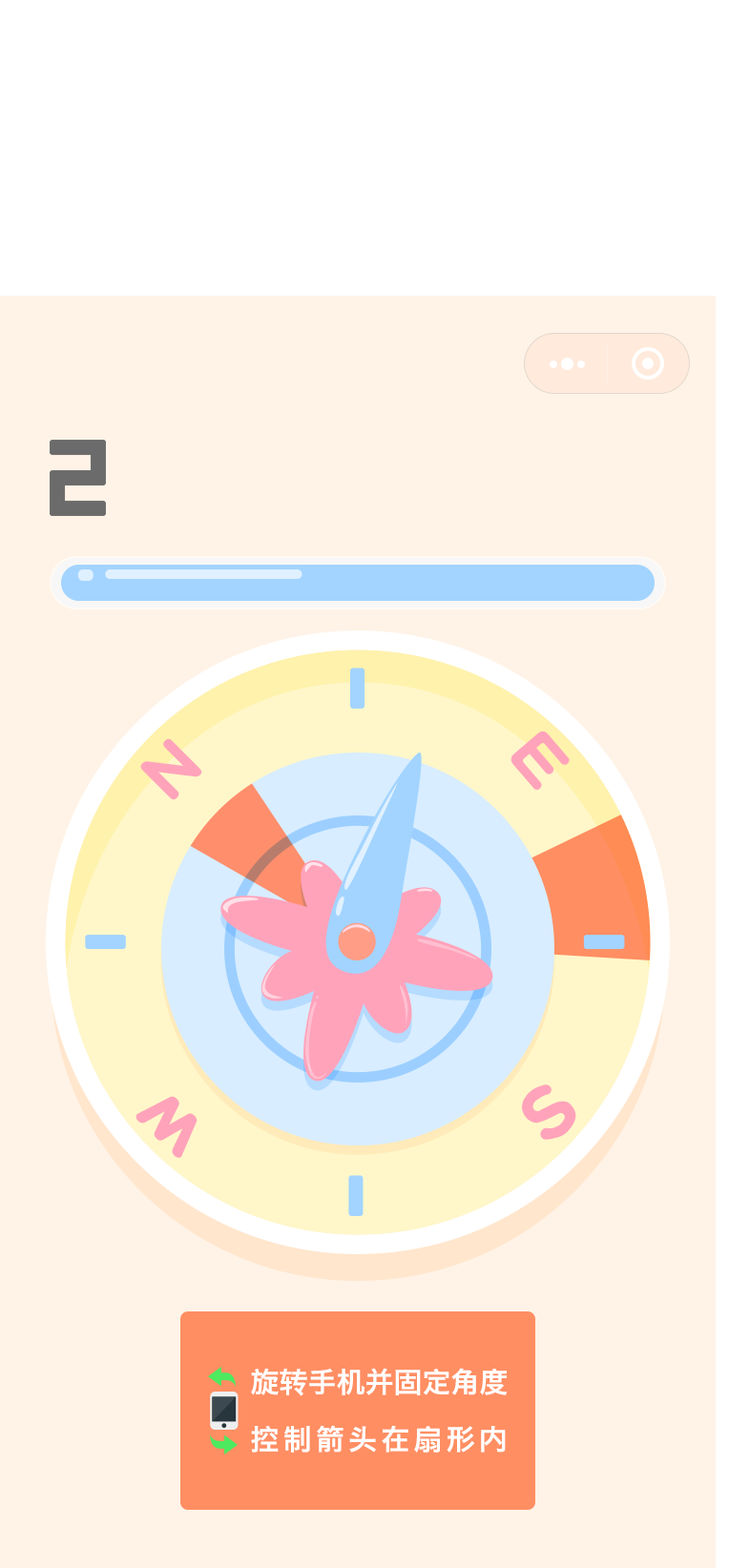
<style>
.page{position:relative;width:729px;height:1568px;background:#fff3e7}
.page>*{position:absolute;margin:0}
.t1{font:70.1px "DFPYuanW9";color:#ffa3bb}
.t2{font:61.5px "DFPYuanW9";color:#ffa3bb;scale:1.31 1}
.t3{font:28.6px/57.2px "HiraginoSansGB-W6";color:#ffffff}
.t4{font:28.6px/57.2px "HiraginoSansGB-W6";letter-spacing:0.14em;color:#ffffff}
</style>
<div class="page">
<p class="t1" style="left:510px;top:731px;width:59px;height:59px;rotate:49deg">E</p>
<p class="t1" style="left:140px;top:738px;width:62px;height:62px;rotate:-45deg">N</p>
<p class="t2" style="left:135px;top:1096px;width:62px;height:62px;rotate:-136deg">W</p>
<p class="t3" style="left:251px;top:1368px;width:256px;height:85px">旋转手机并固定角度<br><span class="t4">控制箭头在扇形内</span></p>
</div>
